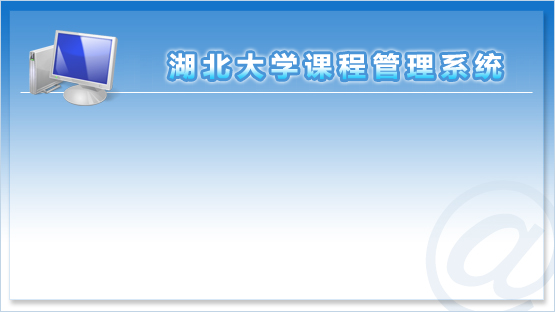
<style>
.page{position:relative;width:555px;height:312px}
.page>*{position:absolute;margin:0}
.t1{font:26.5px "MicrosoftYaHei-Bold";letter-spacing:0.25em;color:#fdfefe}
</style>
<div class="page">
<p class="t1" style="left:169px;top:53px;width:333px;height:27px">湖北大学课程管理系统</p>
</div>
